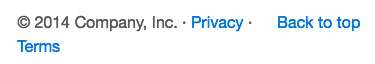
<style>
.page{position:relative;width:375px;height:64px;background:#ffffff}
.page>*{position:absolute;margin:0}
.t1{font:12px "MyriadPro-Regular";color:#5a5a5a}
.t2{font:12px "MyriadPro-Regular";color:#0275d8}
</style>
<div class="page">
<p class="t1" style="left:17px;top:15px;width:235px;height:38px">© 2014 Company, Inc. · <span class="t2">Privacy</span> · <span class="t2">Terms</span></p>
<p class="t2" style="left:278px;top:16px;width:83px;height:16px">Back to top</p>
</div>
